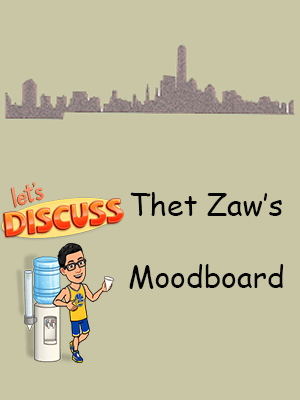
<style>
.page{position:relative;width:300px;height:400px;background:#c8c6a5}
.page>*{position:absolute;margin:0}
.t1{font:30px "ComicSansMS";color:#040405}
</style>
<div class="page">
<p class="t1" style="left:129px;top:192px;width:155px;height:97px;text-align:center">Thet Zaw’s <br><br>Moodboard</p>
</div>
